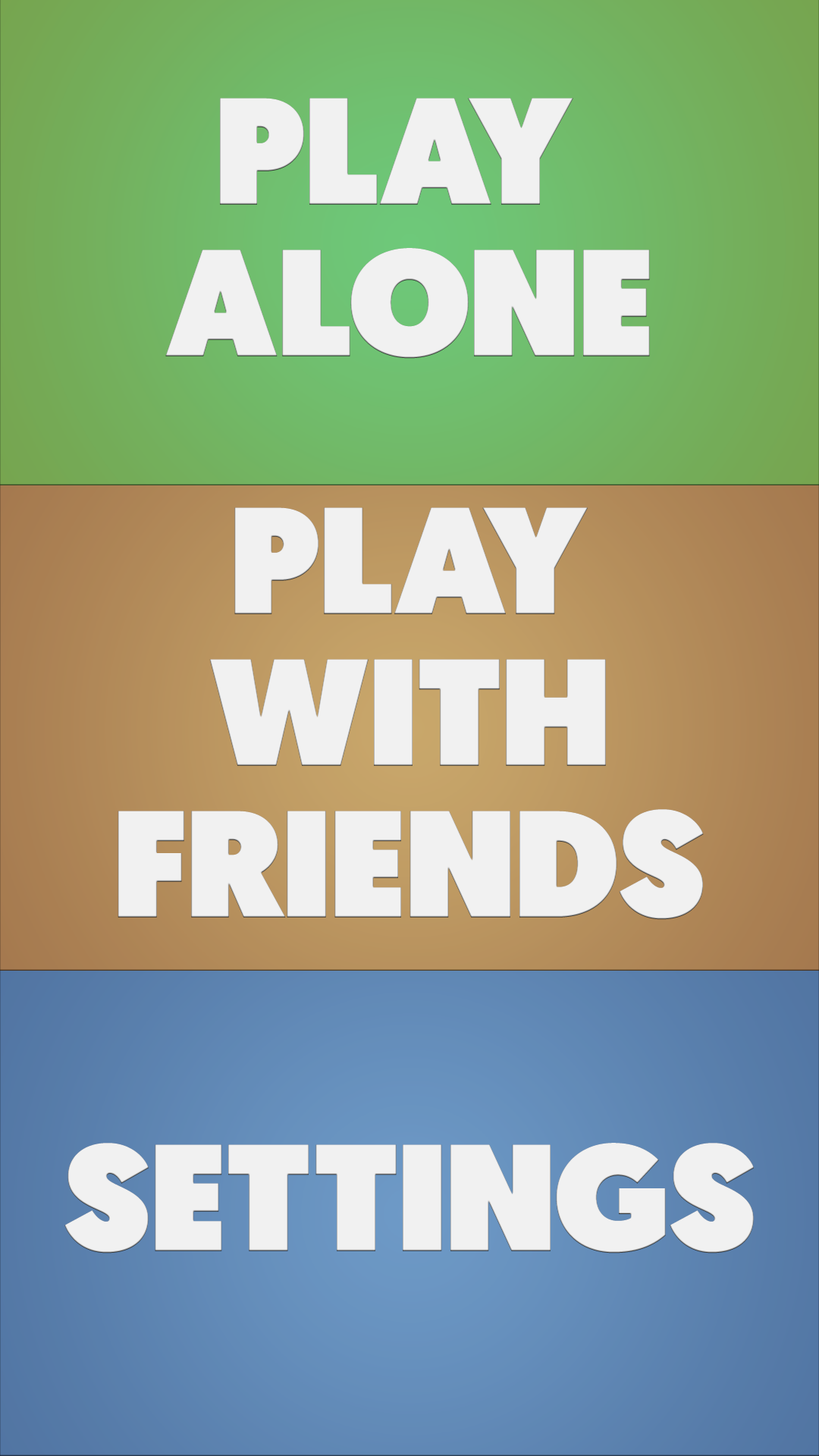
<style>
.page{position:relative;width:819px;height:1456px}
.page>*{position:absolute;margin:0}
.t1{font:151.7px/151.7px "Geomanist-Ultra";color:#f1f1f1}
.t2{font:151.7px "Geomanist-Ultra";color:#f1f1f1}
</style>
<div class="page">
<p class="t1" style="left:165px;top:98px;width:485px;height:261px;text-align:center">PLAY <br>ALONE</p>
<p class="t1" style="left:118px;top:507px;width:586px;height:413px;text-align:center">PLAY<br>WITH<br>FRIENDS</p>
<p class="t2" style="left:64px;top:1143px;width:690px;height:111px">SETTINGS</p>
</div>
